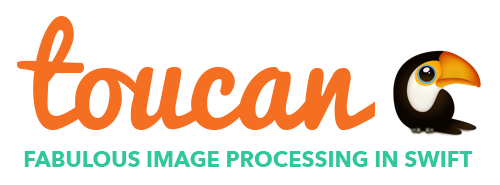
<style>
.page{position:relative;width:500px;height:185px;background:#ffffff}
.page>*{position:absolute;margin:0}
.t1{font:130px "Pacifico";color:#f46f21}
.t2{font:22px "AvenirNext-Bold";color:#30c79a;text-transform:uppercase}
</style>
<div class="page">
<p class="t1" style="left:16px;top:16px;width:359px;height:114px">toucan</p>
<p class="t2" style="left:24px;top:151px;width:449px;height:16px">Fabulous Image Processing in Swift</p>
</div>
